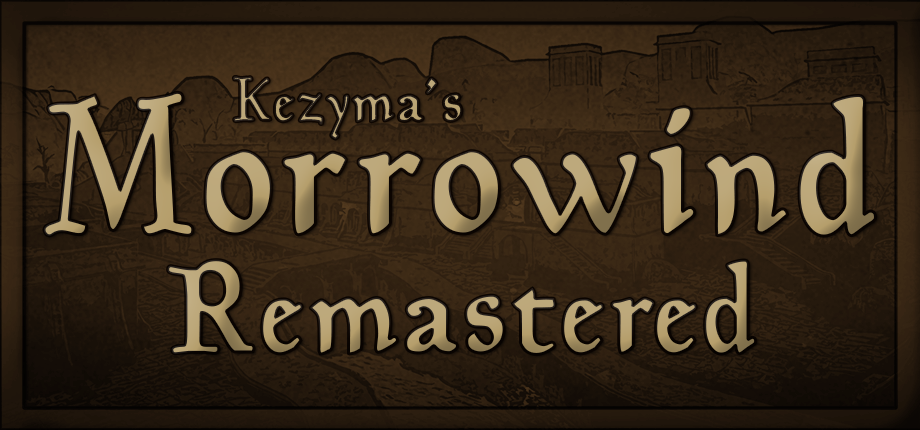
<style>
.page{position:relative;width:920px;height:430px}
.page>*{position:absolute;margin:0}
.t1{font:127.5px/120px "Planewalker-Bold";letter-spacing:0.05em;scale:0.85 1}
.t2{font:60.9px/45.6px "Planewalker-Bold";letter-spacing:0.05em;scale:0.85 1}
.t3{font:190.2px/111px "Planewalker-Bold";letter-spacing:0.05em;scale:0.85 1}
</style>
<div class="page">
<p class="t1" style="left:44px;top:76px;width:832px;height:279px;text-align:right"><span class="t2">Kezyma’s<br></span><span class="t3">Morrowind<br></span>Remastered</p>
</div>
